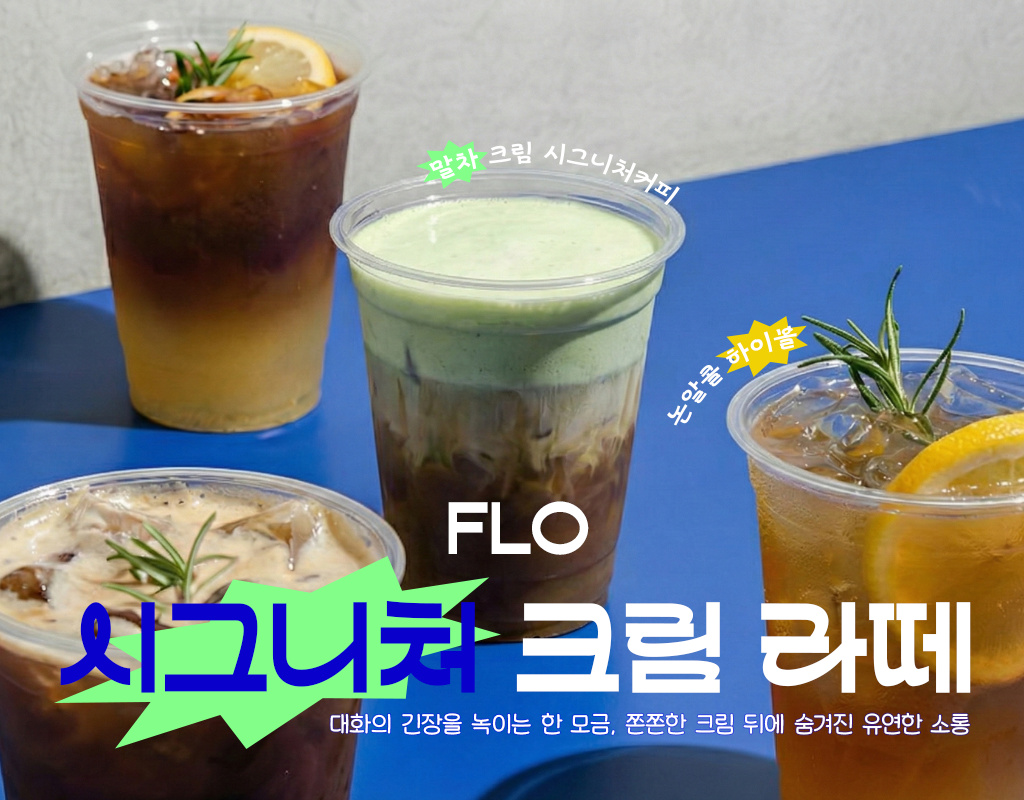
<style>
.page{position:relative;width:1024px;height:800px}
.page>*{position:absolute;margin:0}
.t1{font:25px "MapoBackpacking";letter-spacing:0.01em;color:#ffffff;scale:1.06 1}
.t2{font:80px "HSJandari-Regular";letter-spacing:0.01em;color:#ffffff}
.t3{font:121.7px "HSJandari-Regular";letter-spacing:0.01em;color:#ffffff}
.t4{font:121.7px "HSJandari-Regular";letter-spacing:0.01em;color:#0a00cb}
.t5{font:25px "HakgyoansimDunggeunmisoOTF-R";letter-spacing:0.01em;color:#ffffff}
</style>
<div class="page">
<p class="t1" style="left:428px;top:141px;width:252px;height:65px;rotate:6deg">말차 크림 시그니처커피</p>
<p class="t1" style="left:667px;top:325px;width:130px;height:101px;rotate:-36deg">논알콜 하이볼</p>
<p class="t2" style="left:448px;top:501px;width:141px;height:54px">FLO</p>
<p class="t3" style="left:60px;top:600px;width:911px;height:93px"><span class="t4">시그니처</span> 크림 라떼</p>
<p class="t5" style="left:330px;top:712px;width:640px;height:23px">대화의 긴장을 녹이는 한 모금, 쫀쫀한 크림 뒤에 숨겨진 유연한 소통</p>
</div>
